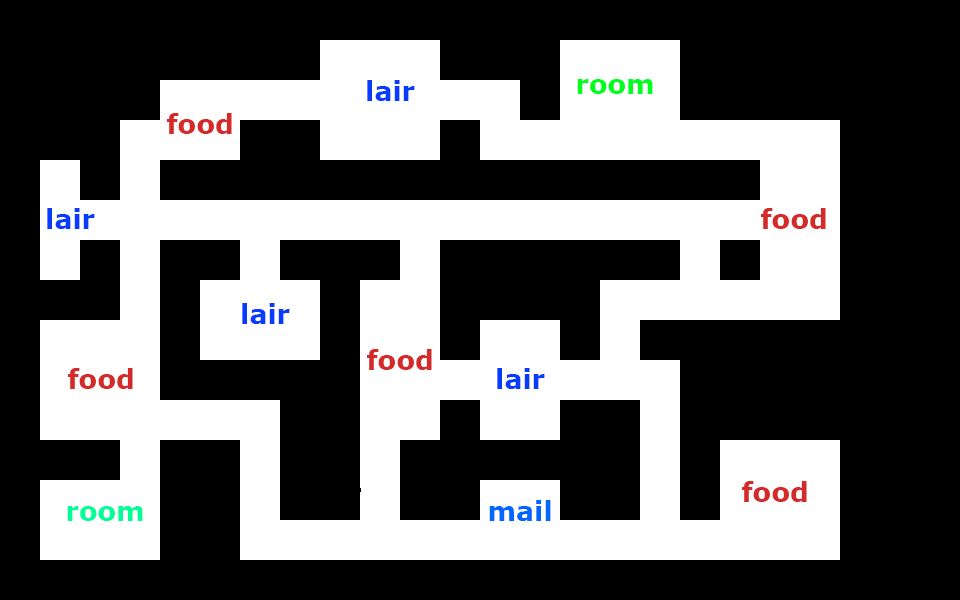
<style>
.page{position:relative;width:960px;height:600px;background:#000000}
.page>*{position:absolute;margin:0}
.t1{font:27px "Verdana-Bold";color:#073cff}
.t2{font:27px "Verdana-Bold";color:#00ff1e}
.t3{font:27px "Verdana-Bold";color:#d52a2a}
.t4{font:27px "Verdana-Bold";color:#00ff96}
.t5{font:27px "Verdana-Bold";color:#0066ff}
</style>
<div class="page">
<p class="t1" style="left:367px;top:80px;width:48px;height:21px">lair</p>
<p class="t2" style="left:577px;top:79px;width:76px;height:15px">room</p>
<p class="t3" style="left:167px;top:113px;width:65px;height:21px">food</p>
<p class="t1" style="left:47px;top:208px;width:48px;height:21px">lair</p>
<p class="t3" style="left:761px;top:208px;width:65px;height:21px">food</p>
<p class="t1" style="left:242px;top:303px;width:48px;height:21px">lair</p>
<p class="t3" style="left:367px;top:349px;width:65px;height:21px">food</p>
<p class="t3" style="left:68px;top:368px;width:65px;height:21px">food</p>
<p class="t1" style="left:497px;top:368px;width:48px;height:21px">lair</p>
<p class="t3" style="left:742px;top:481px;width:65px;height:21px">food</p>
<p class="t4" style="left:67px;top:506px;width:76px;height:15px">room</p>
<p class="t5" style="left:489px;top:500px;width:62px;height:21px">mail</p>
</div>
